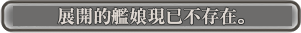
<style>
.page{position:relative;width:301px;height:33px;background:#6d6c6b}
.page>*{position:absolute;margin:0}
.t1{font:18px "RyuminPr6N-ExBold";color:#dfd8d2}
</style>
<div class="page">
<p class="t1" style="left:57px;top:7px;width:187px;height:18px">展開的艦娘現已不存在。</p>
</div>
